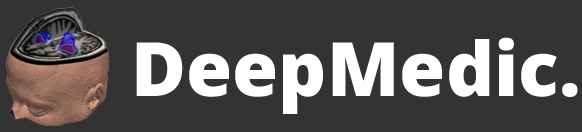
<style>
.page{position:relative;width:582px;height:132px;background:#333333}
.page>*{position:absolute;margin:0}
.t1{font:75px "OpenSans-ExtraBold";color:#ffffff}
</style>
<div class="page">
<p class="t1" style="left:136px;top:37px;width:442px;height:77px">DeepMedic.</p>
</div>
